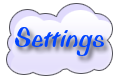
<style>
.page{position:relative;width:120px;height:80px;background:#ffffff}
.page>*{position:absolute;margin:0}
.t1{font:30px "BiffoMTStd";color:#0144ff}
</style>
<div class="page">
<p class="t1" style="left:15px;top:27px;width:89px;height:29px">Settings</p>
</div>
